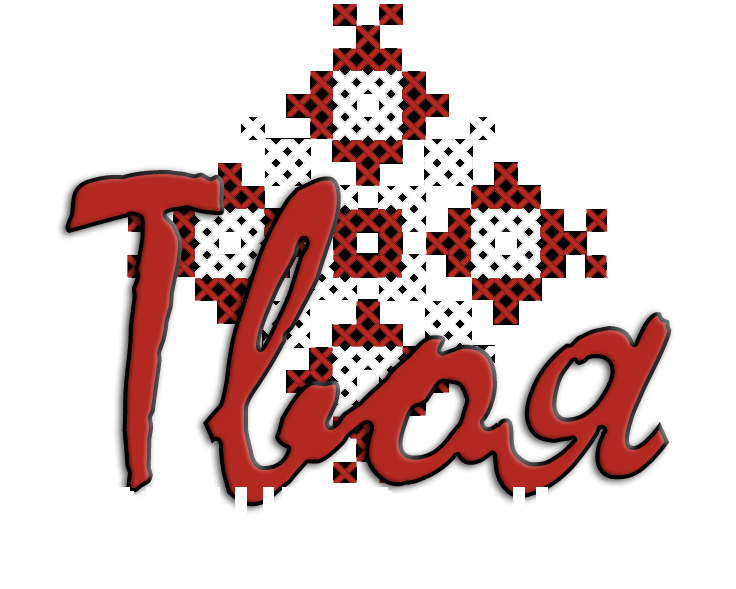
<style>
.page{position:relative;width:736px;height:589px;background:#ffffff}
.page>*{position:absolute;margin:0}
.t1{font:454.2px "Mistral";color:#b32821}
</style>
<div class="page">
<p class="t1" style="left:65px;top:170px;width:607px;height:337px">Твоя</p>
</div>
